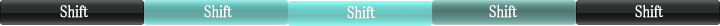
<style>
.page{position:relative;width:720px;height:26px}
.page>*{position:absolute;margin:0}
.t1{font:17.1px "MS-PMincho";color:#ffffff;font-weight:bold;scale:0.84 1}
</style>
<div class="page">
<p class="t1" style="left:60px;top:5px;width:28px;height:13px">Shift</p>
<p class="t1" style="left:204px;top:5px;width:28px;height:13px">Shift</p>
<p class="t1" style="left:347px;top:6px;width:28px;height:13px">Shift</p>
<p class="t1" style="left:489px;top:5px;width:28px;height:13px">Shift</p>
<p class="t1" style="left:635px;top:5px;width:28px;height:13px">Shift</p>
</div>
